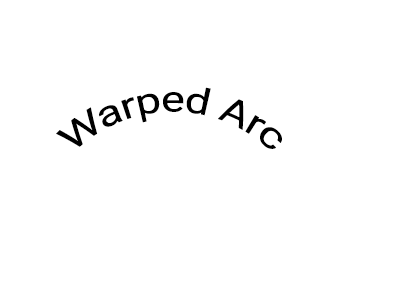
<style>
.page{position:relative;width:400px;height:300px;background:#ffffff}
.page>*{position:absolute;margin:0}
.t1{font:36px "Roboto-Regular";color:#000000}
</style>
<div class="page">
<p class="t1" style="left:56px;top:87px;width:226px;height:62px">Warped Arc</p>
</div>
